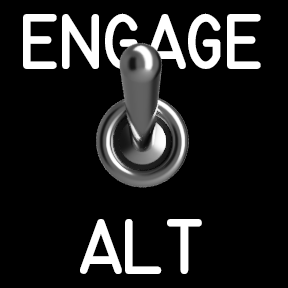
<style>
.page{position:relative;width:288px;height:288px;background:#000000}
.page>*{position:absolute;margin:0}
.t1{font:55px "MS-33558-Regular";letter-spacing:-0.04em;color:#ffffff}
</style>
<div class="page">
<p class="t1" style="left:23px;top:13px;width:238px;height:56px">ENGAGE</p>
<p class="t1" style="left:80px;top:219px;width:122px;height:55px">ALT</p>
</div>
